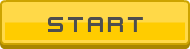
<style>
.page{position:relative;width:190px;height:49px;background:#ffd948}
.page>*{position:absolute;margin:0}
.t1{font:24px "KenVector-Future";color:#4e4e4e}
</style>
<div class="page">
<p class="t1" style="left:48px;top:17px;width:95px;height:15px">Start</p>
</div>
